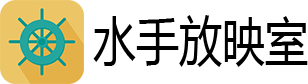
<style>
.page{position:relative;width:308px;height:84px;background:#ffffff}
.page>*{position:absolute;margin:0}
.t1{font:52.8px "MicrosoftYaHei";color:#000000;scale:0.81 1}
</style>
<div class="page">
<p class="t1" style="left:93px;top:15px;width:215px;height:52px">水手放映室</p>
</div>
